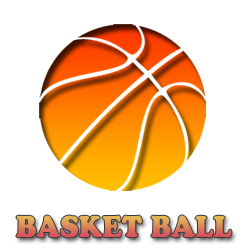
<style>
.page{position:relative;width:250px;height:250px;background:#ffffff}
.page>*{position:absolute;margin:0}
.t1{font:29.8px "CooperBlackStd";text-transform:uppercase;scale:0.91 1}
</style>
<div class="page">
<p class="t1" style="left:16px;top:215px;width:216px;height:23px">basket ball</p>
</div>
